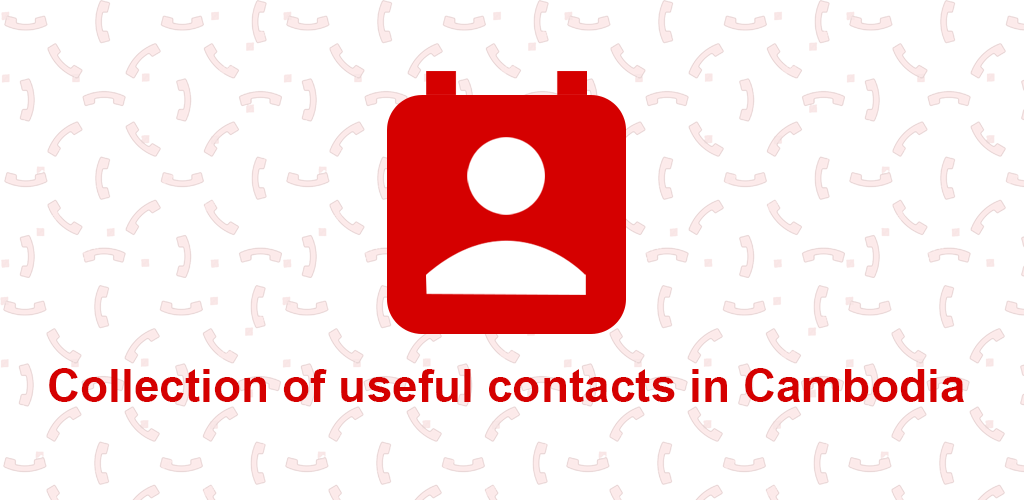
<style>
.page{position:relative;width:1024px;height:500px;background:#ffffff}
.page>*{position:absolute;margin:0}
.t1{font:46px "Arial-BoldMT";color:#d50000}
</style>
<div class="page">
<p class="t1" style="left:49px;top:368px;width:915px;height:34px">Collection of useful contacts in Cambodia</p>
</div>
